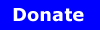
<style>
.page{position:relative;width:100px;height:30px;background:#0000ff}
.page>*{position:absolute;margin:0}
.t1{font:18px "Verdana-Bold";color:#ffffff}
</style>
<div class="page">
<p class="t1" style="left:13px;top:8px;width:71px;height:14px">Donate</p>
</div>
